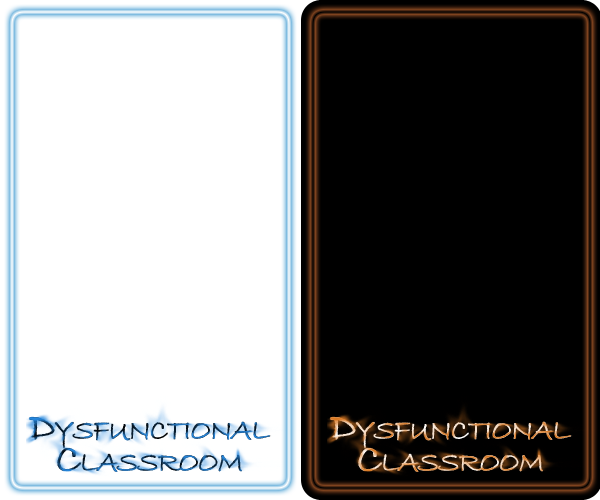
<style>
.page{position:relative;width:600px;height:500px;background:#000000}
.page>*{position:absolute;margin:0}
.t1{font:41.6px/32.1px "BradleyHandITC";letter-spacing:-0.05em;font-variant:small-caps;font-weight:bold}
</style>
<div class="page">
<p class="t1" style="left:29px;top:417px;width:242px;height:55px;text-align:center">Dysfunctional<br>Classroom</p>
<p class="t1" style="left:330px;top:417px;width:242px;height:55px;text-align:center">Dysfunctional<br>Classroom</p>
</div>
